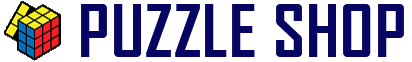
<style>
.page{position:relative;width:412px;height:62px;background:#ffffff}
.page>*{position:absolute;margin:0}
.t1{font:70px "AgencyFB-Bold";letter-spacing:0.015em;color:#070562}
</style>
<div class="page">
<p class="t1" style="left:81px;top:4px;width:323px;height:53px">PUZZLE SHOP</p>
</div>
